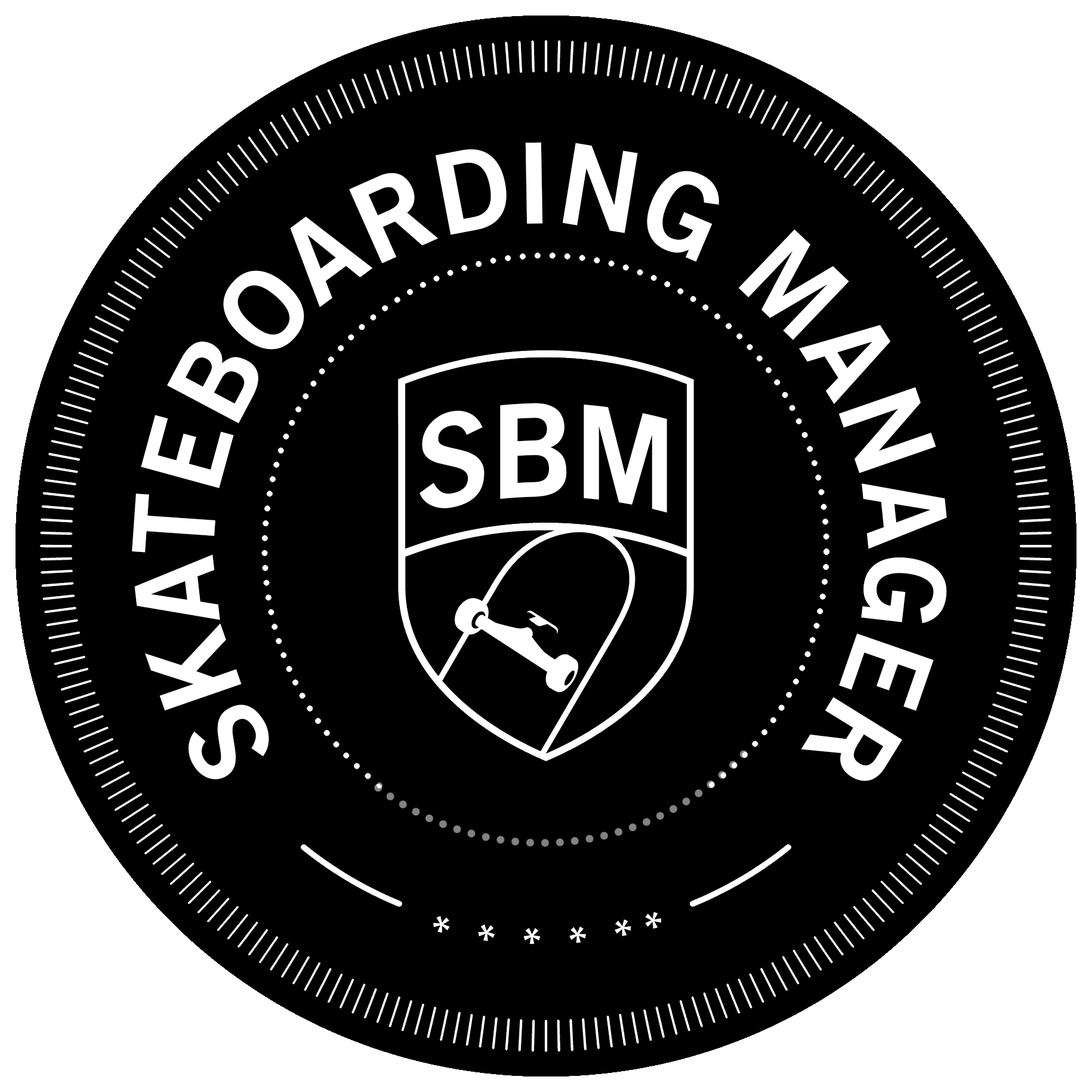
<style>
.page{position:relative;width:1092px;height:1092px;background:#000000}
.page>*{position:absolute;margin:0}
.t1{font:111.9px "TradeGothicNo.2-Bold";color:#ffffff}
.t2{font:129.4px "TradeGothicNo.2-Bold";color:#ffffff;scale:0.96 1}
.t3{font:44.8px "TradeGothicNo.2-Bold";color:#ffffff}
</style>
<div class="page">
<p class="t1" style="left:132px;top:142px;width:815px;height:639px;rotate:3deg">SKATEBOARDING MANAGER</p>
<p class="t2" style="left:419px;top:403px;width:248px;height:110px">SBM</p>
<p class="t3" style="left:433px;top:912px;width:228px;height:32px">* * * * * *</p>
</div>
